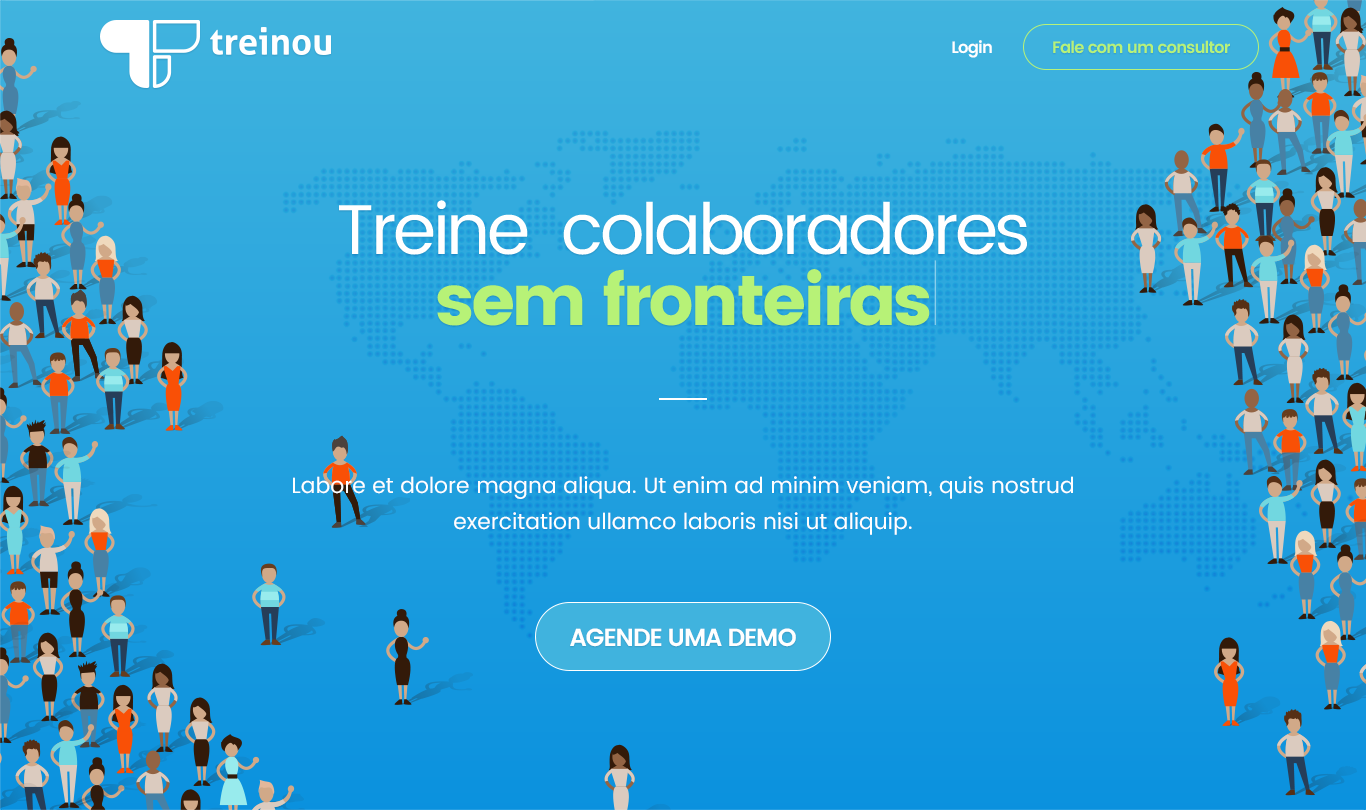
<style>
.page{position:relative;width:1366px;height:810px}
.page>*{position:absolute;margin:0}
.t1{font:16.5px "Poppins-SemiBold";letter-spacing:-0.05em;color:#ffffff}
.t2{font:16.5px "Poppins-SemiBold";letter-spacing:-0.05em;color:#b7f277}
.t3{font:70.5px/70.5px "Poppins-Regular";letter-spacing:-0.05em;color:#ffffff}
.t4{font:70.5px/70.5px "Poppins";letter-spacing:-0.05em;color:#b7f277}
.t5{font:22px/36px "Poppins-Regular";color:#ffffff}
.t6{font:24.7px "Poppins-SemiBold";letter-spacing:-0.05em;color:#ffffff;text-transform:uppercase}
</style>
<div class="page">
<p class="t1" style="left:952px;top:40px;width:40px;height:18px">Login</p>
<p class="t2" style="left:1053px;top:40px;width:177px;height:14px">Fale com um consultor</p>
<p class="t3" style="left:339px;top:200px;width:688px;height:126px;text-align:center">Treine  colaboradores<br><span class="t4">sem fronteiras</span></p>
<p class="t5" style="left:293px;top:476px;width:780px;height:59px;text-align:center">Labore et dolore magna aliqua. Ut enim ad minim veniam, quis nostrud exercitation ullamco laboris nisi ut aliquip.</p>
<p class="t6" style="left:570px;top:628px;width:226px;height:19px">agende uma demo</p>
</div>
